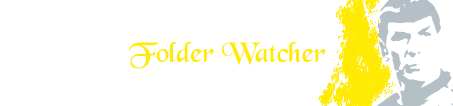
<style>
.page{position:relative;width:453px;height:106px;background:#ffffff}
.page>*{position:absolute;margin:0}
.t1{font:30px "BlackChancery";color:#ffea03}
</style>
<div class="page">
<p class="t1" style="left:129px;top:42px;width:197px;height:27px">Folder Watcher</p>
</div>
